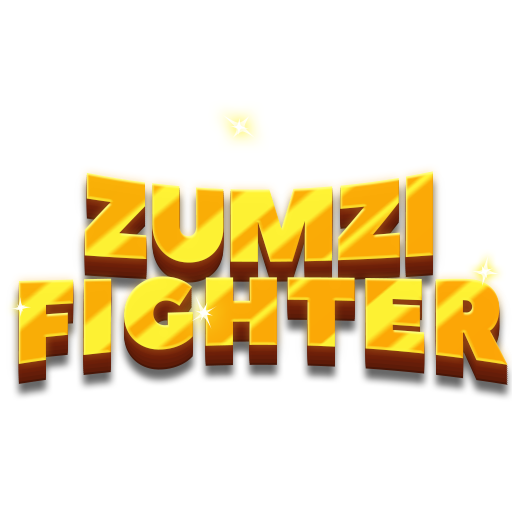
<style>
.page{position:relative;width:512px;height:512px;background:#ffffff}
.page>*{position:absolute;margin:0}
.t1{font:119.8px "PeaceSans";letter-spacing:-0.05em;scale:0.87 1}
.t2{font:119.8px "PeaceSans";letter-spacing:0.025em;scale:0.87 1}
</style>
<div class="page">
<p class="t1" style="left:84px;top:171px;width:349px;height:92px">ZUMZI</p>
<p class="t2" style="left:18px;top:276px;width:490px;height:89px">FIGHTER</p>
</div>
